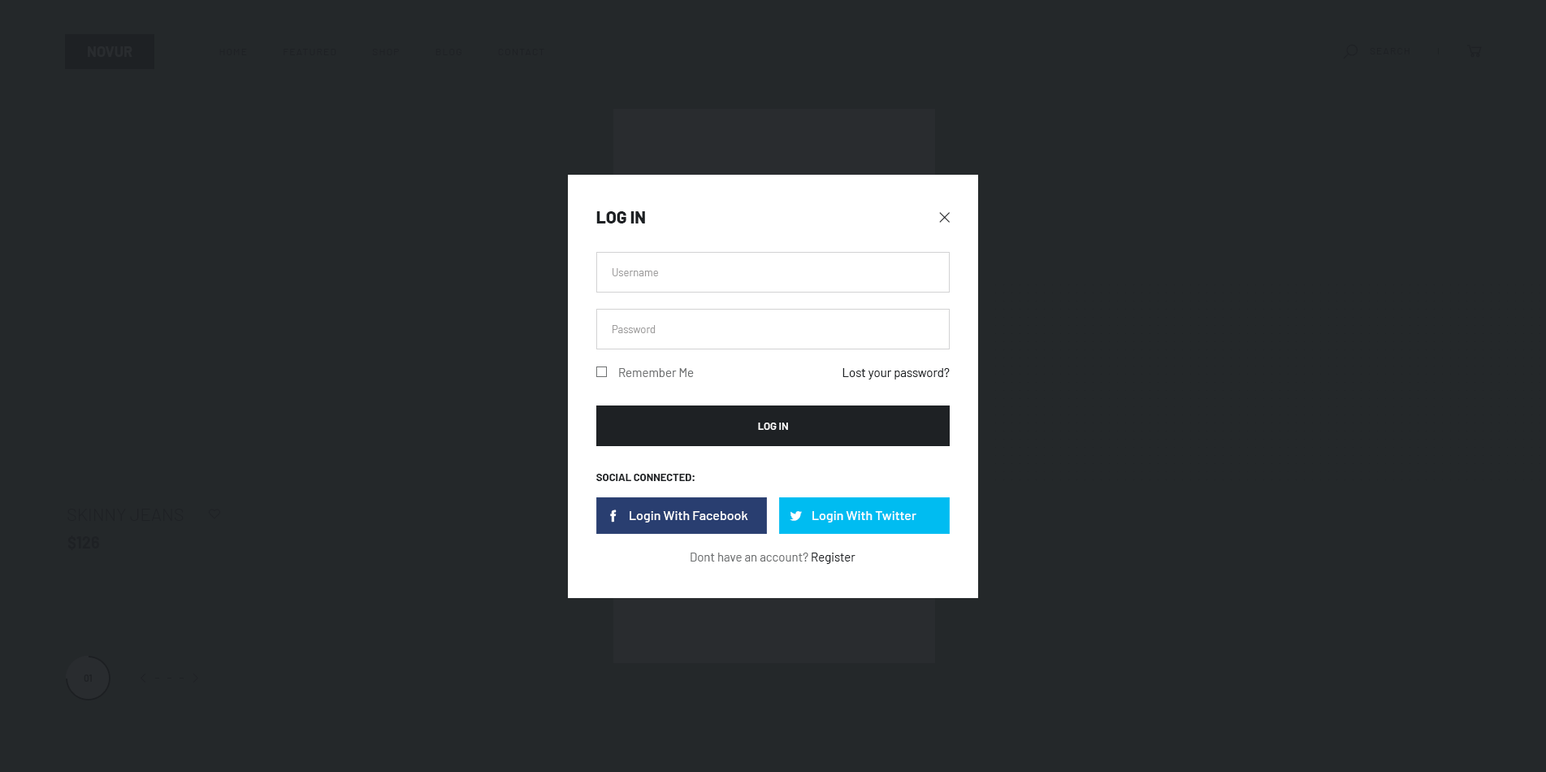
<style>
.page{position:relative;width:1546px;height:772px;background:#24282a}
.page>*{position:absolute;margin:0}
.t1{font:14.6px "Barlow-Bold";color:#292c2f;text-transform:uppercase}
.t2{font:9.7px "Barlow-Regular";letter-spacing:0.1em;color:#1e2124;text-transform:uppercase}
.t3{font:17.1px "Barlow-ExtraBold";color:#1e2124;text-transform:uppercase}
.t4{font:10.6px "Barlow-Regular";color:#9e9d9d}
.t5{font:12.2px "Barlow-Regular";color:#6e7071}
.t6{font:12.2px "Barlow-Regular";color:#1e2124}
.t7{font:10.6px "Barlow-SemiBold";color:#ffffff;text-transform:uppercase}
.t8{font:10.6px "Barlow-Bold";color:#1e2124;text-transform:uppercase}
.t9{font:17.9px "Barlow-Light";color:#1e2124;text-transform:uppercase}
.t10{font:13px "Barlow-Medium";color:#ffffff}
.t11{font:16.2px "Barlow-Bold";color:#1e2124}
.t12{font:9.7px "Barlow-Bold";color:#1e2124;text-transform:uppercase}
</style>
<div class="page">
<p class="t1" style="left:88px;top:46px;width:44px;height:11px">novur</p>
<p class="t2" style="left:219px;top:49px;width:325px;height:6px">Home            Featured            Shop            Blog            Contact</p>
<p class="t2" style="left:1369px;top:48px;width:40px;height:6px">Search</p>
<p class="t3" style="left:596px;top:211px;width:49px;height:12px">Log in</p>
<p class="t4" style="left:612px;top:268px;width:46px;height:8px">Username</p>
<p class="t4" style="left:612px;top:325px;width:43px;height:8px">Password</p>
<p class="t5" style="left:619px;top:368px;width:75px;height:9px">Remember Me</p>
<p class="t6" style="left:842px;top:368px;width:107px;height:11px">Lost your password?</p>
<p class="t7" style="left:758px;top:422px;width:30px;height:8px">Log In</p>
<p class="t8" style="left:596px;top:473px;width:98px;height:8px">Social connected:</p>
<p class="t9" style="left:67px;top:508px;width:117px;height:13px">SKINNY JEANS</p>
<p class="t10" style="left:629px;top:511px;width:119px;height:11px">Login With Facebook</p>
<p class="t10" style="left:812px;top:511px;width:104px;height:11px">Login With Twitter</p>
<p class="t11" style="left:67px;top:535px;width:33px;height:15px">$126</p>
<p class="t5" style="left:690px;top:552px;width:165px;height:12px">Dont have an account? <span class="t6">Register</span></p>
<p class="t12" style="left:84px;top:674px;width:8px;height:7px">01</p>
</div>
